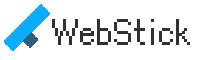
<style>
.page{position:relative;width:200px;height:60px;background:#ffffff}
.page>*{position:absolute;margin:0}
.t1{font:34px "Cubic_11";color:#313131}
</style>
<div class="page">
<p class="t1" style="left:52px;top:19px;width:138px;height:26px">WebStick</p>
</div>
